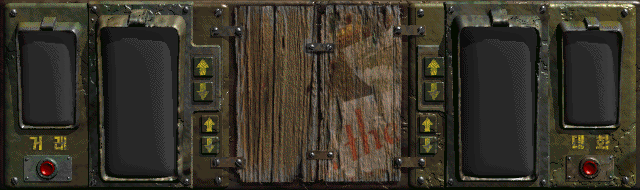
<style>
.page{position:relative;width:640px;height:190px}
.page>*{position:absolute;margin:0}
.t1{font:15px "HakgyoansimPosterB"}
</style>
<div class="page">
<p class="t1" style="left:29px;top:136px;width:38px;height:14px">거   래</p>
<p class="t1" style="left:572px;top:135px;width:38px;height:15px">대   화</p>
</div>
